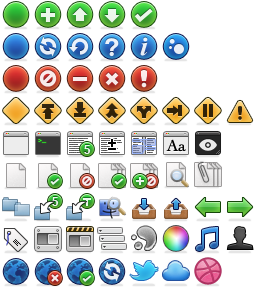
<style>
.page{position:relative;width:256px;height:288px;background:#ffffff}
.page>*{position:absolute;margin:0}
.t1{font:6.7px "Courier";color:#30ff20}
.t2{font:11.6px "Helvetica-Bold";color:#ffffff}
.t3{font:16.4px "Cochin";color:#000000}
</style>
<div class="page">
<p class="t1" style="left:38px;top:139px;width:9px;height:4px">&gt;_</p>
<p class="t2" style="left:84px;top:145px;width:7px;height:9px">5</p>
<p class="t3" style="left:166px;top:139px;width:20px;height:13px">Aa</p>
<p class="t2" style="left:52px;top:197px;width:7px;height:9px">5</p>
</div>
